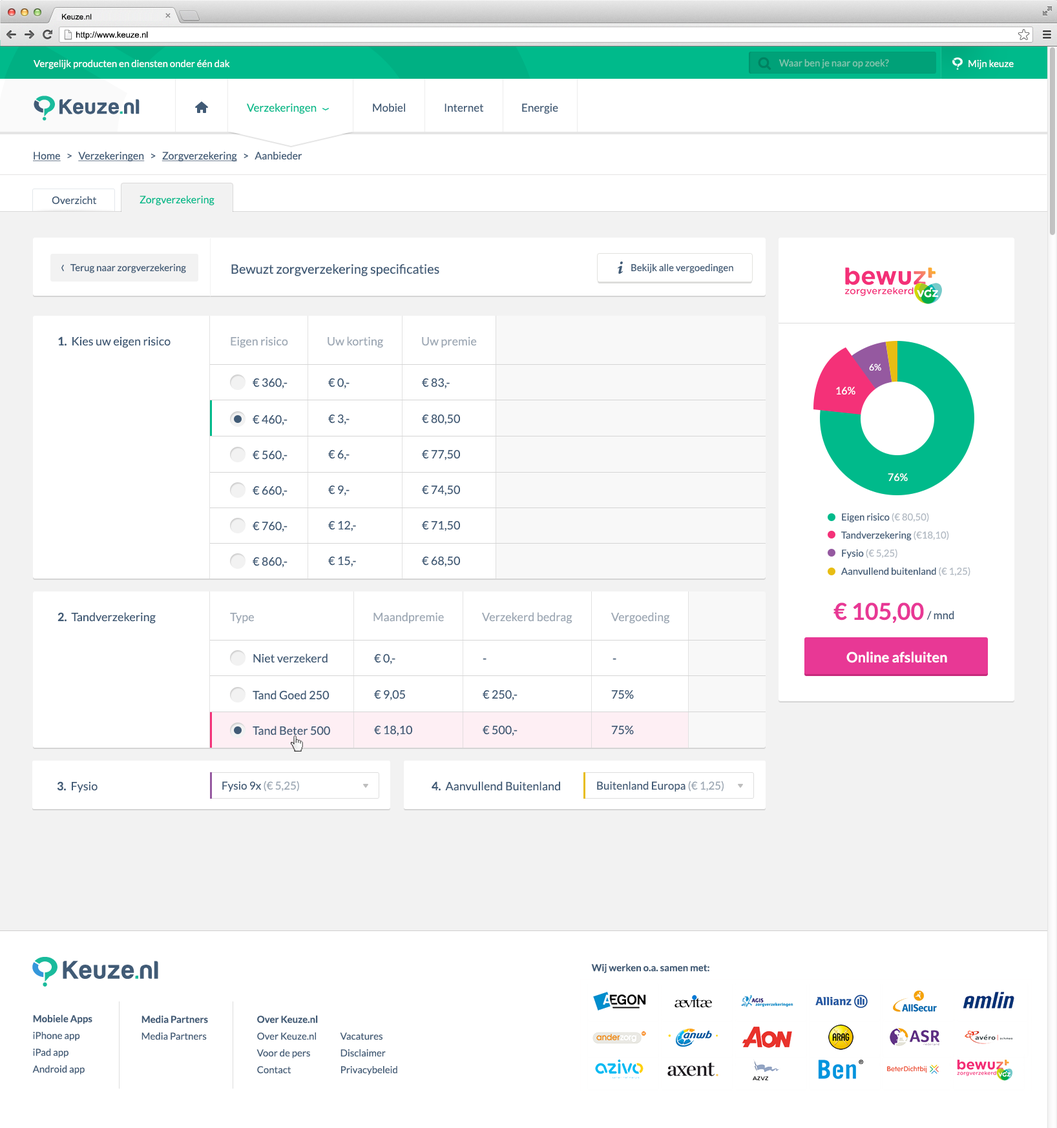
<style>
.page{position:relative;width:1057px;height:1128px;background:#ffffff}
.page>*{position:absolute;margin:0}
.t1{font:7.8px "ArialMT";color:#000000}
.t2{font:8.4px "ArialMT";color:#000000}
.t3{font:9.7px "Lato-Regular";color:#ffffff}
.t4{font:9.7px "Lato-Regular";color:#80c5ae}
.t5{font:11px "Lato-Regular";color:#00ba8b}
.t6{font:11px "Lato-Regular";color:#415b76}
.t7{font:10.3px "Lato-Regular";color:#415b76;text-decoration:underline}
.t8{font:10.3px "Lato-Regular";color:#415b76}
.t9{font:10.3px "Lato-Regular";color:#01ba8b}
.t10{font:9.7px "Lato-Regular";color:#415b76}
.t11{font:12.9px "Lato-Regular";color:#415b76}
.t12{font:11.6px "Lato-Regular";color:#415b76}
.t13{font:11.6px "Lato-Bold";color:#415b76}
.t14{font:11.6px "Lato-Regular";color:#9ea9b5}
.t15{font:9px "Lato-Regular";color:#ffffff}
.t16{font:10.3px "Lato-Regular";color:#ffffff}
.t17{font:9.7px/18.1px "Lato-Regular";color:#415b76}
.t18{font:9.7px/18.1px "Lato-Regular";color:#b2bac3}
.t19{font:23.3px "Lato-Bold";color:#e83895}
.t20{font:14.2px "Lato-Bold";color:#ffffff}
.t21{font:11px "Lato-Regular";color:#9ea9b5}
.t22{font:9.7px "Lato-Bold";color:#415b76}
.t23{font:9.7px/16.8px "Lato-Bold";color:#415b76}
.t24{font:9.7px/16.8px "Lato-Regular";color:#415b76}
.t25{font:9.7px/16.8px "Lato-Regular";letter-spacing:2em;color:#415b76}
</style>
<div class="page">
<p class="t1" style="left:62px;top:14px;width:30px;height:6px">Keuze.nl</p>
<p class="t2" style="left:76px;top:31px;width:72px;height:8px">http://www.keuze.nl</p>
<p class="t3" style="left:34px;top:59px;width:196px;height:10px">Vergelijk producten en diensten onder één dak</p>
<p class="t4" style="left:779px;top:59px;width:110px;height:9px">Waar ben je naar op zoek?</p>
<p class="t3" style="left:968px;top:59px;width:45px;height:10px">Mijn keuze</p>
<p class="t5" style="left:247px;top:103px;width:70px;height:11px">Verzekeringen</p>
<p class="t6" style="left:373px;top:103px;width:32px;height:9px">Mobiel</p>
<p class="t6" style="left:444px;top:103px;width:40px;height:9px">Internet</p>
<p class="t6" style="left:522px;top:103px;width:36px;height:11px">Energie</p>
<p class="t7" style="left:33px;top:152px;width:269px;height:9px">Home<span class="t8">   &gt;   </span>Verzekeringen<span class="t8">   &gt;   </span>Zorgverzekering<span class="t8">   &gt;   Aanbieder</span></p>
<p class="t8" style="left:52px;top:196px;width:45px;height:8px">Overzicht</p>
<p class="t9" style="left:140px;top:196px;width:74px;height:9px">Zorgverzekering</p>
<p class="t10" style="left:70px;top:264px;width:116px;height:9px">Terug naar zorgverzekering</p>
<p class="t11" style="left:231px;top:264px;width:208px;height:12px">Bewuzt zorgverzekering specificaties</p>
<p class="t10" style="left:631px;top:264px;width:102px;height:9px">Bekijk alle vergoedingen</p>
<p class="t12" style="left:58px;top:337px;width:113px;height:11px"><span class="t13">1.  </span>Kies uw eigen risico</p>
<p class="t14" style="left:231px;top:337px;width:57px;height:11px">Eigen risico</p>
<p class="t14" style="left:327px;top:337px;width:56px;height:11px">Uw korting</p>
<p class="t14" style="left:422px;top:337px;width:55px;height:11px">Uw premie</p>
<p class="t15" style="left:869px;top:364px;width:12px;height:7px">6%</p>
<p class="t12" style="left:253px;top:378px;width:34px;height:11px">€ 360,-</p>
<p class="t12" style="left:328px;top:378px;width:21px;height:11px">€ 0,-</p>
<p class="t12" style="left:422px;top:378px;width:28px;height:11px">€ 83,-</p>
<p class="t16" style="left:836px;top:387px;width:19px;height:8px">16%</p>
<p class="t12" style="left:253px;top:415px;width:34px;height:11px">€ 460,-</p>
<p class="t12" style="left:328px;top:414px;width:21px;height:11px">€ 3,-</p>
<p class="t12" style="left:422px;top:414px;width:38px;height:11px">€ 80,50</p>
<p class="t12" style="left:328px;top:450px;width:21px;height:11px">€ 6,-</p>
<p class="t12" style="left:422px;top:450px;width:38px;height:11px">€ 77,50</p>
<p class="t12" style="left:253px;top:450px;width:34px;height:11px">€ 560,-</p>
<p class="t16" style="left:887px;top:473px;width:21px;height:8px">76%</p>
<p class="t12" style="left:253px;top:486px;width:34px;height:11px">€ 660,-</p>
<p class="t12" style="left:328px;top:485px;width:21px;height:11px">€ 9,-</p>
<p class="t12" style="left:422px;top:485px;width:38px;height:11px">€ 74,50</p>
<p class="t12" style="left:253px;top:521px;width:34px;height:11px">€ 760,-</p>
<p class="t12" style="left:328px;top:521px;width:28px;height:11px">€ 12,-</p>
<p class="t12" style="left:422px;top:521px;width:38px;height:11px">€ 71,50</p>
<p class="t17" style="left:841px;top:513px;width:129px;height:64px">Eigen risico <span class="t18">(€ 80,50)<br></span>Tandverzekering <span class="t18">(€18,10)<br></span>Fysio <span class="t18">(€ 5,25)<br></span>Aanvullend buitenland <span class="t18">(€ 1,25)</span></p>
<p class="t12" style="left:253px;top:557px;width:34px;height:11px">€ 860,-</p>
<p class="t12" style="left:328px;top:556px;width:28px;height:11px">€ 15,-</p>
<p class="t12" style="left:422px;top:556px;width:38px;height:11px">€ 68,50</p>
<p class="t19" style="left:833px;top:603px;width:91px;height:20px">€ 105,00</p>
<p class="t12" style="left:57px;top:612px;width:99px;height:12px"><span class="t13">2.  </span>Tandverzekering</p>
<p class="t14" style="left:230px;top:613px;width:24px;height:11px">Type</p>
<p class="t14" style="left:373px;top:612px;width:71px;height:12px">Maandpremie</p>
<p class="t14" style="left:482px;top:612px;width:90px;height:12px">Verzekerd bedrag</p>
<p class="t14" style="left:611px;top:612px;width:59px;height:12px">Vergoeding</p>
<p class="t6" style="left:926px;top:611px;width:28px;height:9px">/ mnd</p>
<p class="t12" style="left:253px;top:654px;width:74px;height:9px">Niet verzekerd</p>
<p class="t12" style="left:374px;top:654px;width:21px;height:11px">€ 0,-</p>
<p class="t20" style="left:846px;top:652px;width:101px;height:11px">Online afsluiten</p>
<p class="t12" style="left:483px;top:658px;width:3px;height:2px">-</p>
<p class="t12" style="left:612px;top:658px;width:4px;height:2px">-</p>
<p class="t12" style="left:374px;top:690px;width:31px;height:11px">€ 9,05</p>
<p class="t12" style="left:483px;top:690px;width:34px;height:11px">€ 250,-</p>
<p class="t12" style="left:611px;top:690px;width:23px;height:10px">75%</p>
<p class="t12" style="left:253px;top:690px;width:76px;height:10px">Tand Goed 250</p>
<p class="t12" style="left:374px;top:725px;width:38px;height:11px">€ 18,10</p>
<p class="t12" style="left:483px;top:725px;width:34px;height:11px">€ 500,-</p>
<p class="t12" style="left:611px;top:725px;width:23px;height:10px">75%</p>
<p class="t12" style="left:253px;top:726px;width:77px;height:10px">Tand Beter 500</p>
<p class="t12" style="left:57px;top:782px;width:41px;height:11px"><span class="t13">3.  </span>Fysio</p>
<p class="t6" style="left:222px;top:781px;width:77px;height:11px">Fysio 9x <span class="t21">(€ 5,25)</span></p>
<p class="t12" style="left:431px;top:782px;width:129px;height:9px"><span class="t13">4.  </span>Aanvullend Buitenland</p>
<p class="t6" style="left:597px;top:781px;width:126px;height:11px">Buitenland Europa <span class="t21">(€ 1,25)</span></p>
<p class="t22" style="left:591px;top:964px;width:118px;height:9px">Wij werken o.a. samen met:</p>
<p class="t23" style="left:32px;top:1015px;width:60px;height:60px">Mobiele Apps  <span class="t24">iPhone ap</span><span class="t25">p<br></span><span class="t24">iPad ap</span><span class="t25">p<br></span><span class="t24">Android app</span></p>
<p class="t23" style="left:141px;top:1015px;width:67px;height:26px">Media Partners  <span class="t24">Media Partners</span></p>
<p class="t23" style="left:256px;top:1015px;width:62px;height:59px">Over Keuze.nl  <span class="t24">Over Keuze.n</span><span class="t25">l<br></span><span class="t24">Voor de per</span><span class="t25">s<br></span><span class="t24">Contac</span><span class="t25">t</span></p>
<p class="t24" style="left:340px;top:1033px;width:57px;height:42px"><span class="t23"><br></span>Vacature<span class="t25">s<br></span>Disclaime<span class="t25">r<br></span>Privacybeleid</p>
</div>
